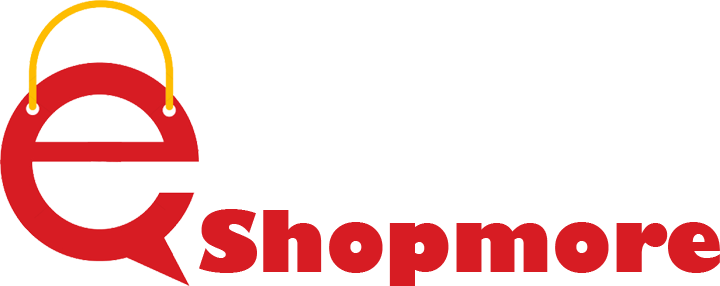
<style>
.page{position:relative;width:720px;height:286px;background:#ffffff}
.page>*{position:absolute;margin:0}
.t1{font:83.3px "GillSans-UltraBold";color:#d71c23}
</style>
<div class="page">
<p class="t1" style="left:199px;top:209px;width:521px;height:77px">Shopmore</p>
</div>
